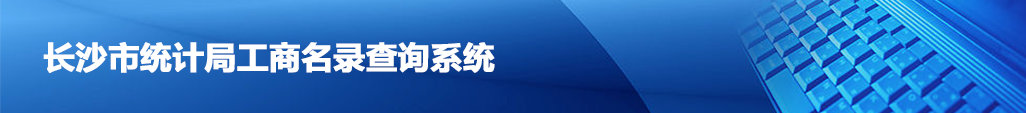
<style>
.page{position:relative;width:1026px;height:113px}
.page>*{position:absolute;margin:0}
.t1{font:31.1px "MicrosoftYaHei-Bold";color:#ffffff;font-weight:bold}
</style>
<div class="page">
<p class="t1" style="left:43px;top:42px;width:452px;height:31px">长沙市统计局工商名录查询系统</p>
</div>
